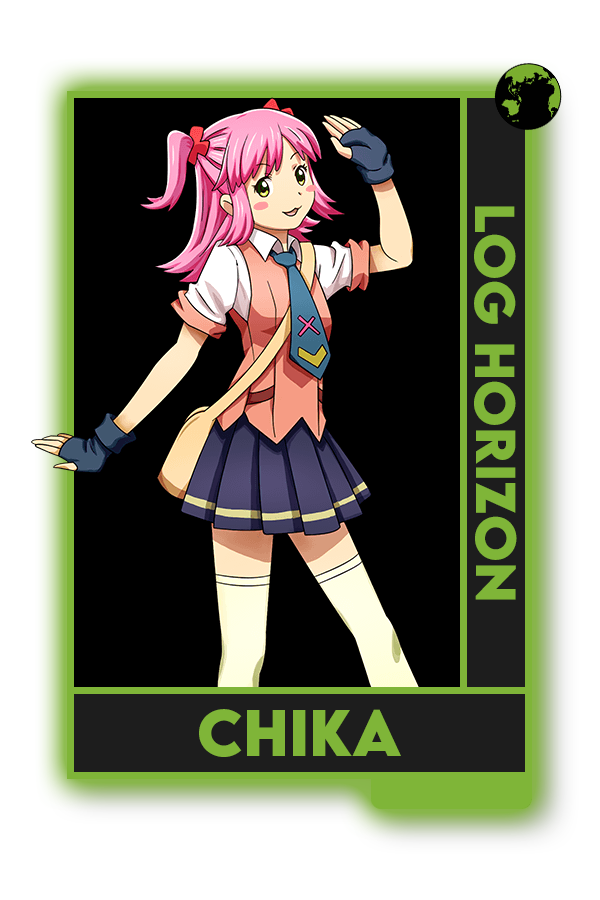
<style>
.page{position:relative;width:600px;height:900px;background:#000000}
.page>*{position:absolute;margin:0}
.t1{font:50px "LEMONMILK-Bold";color:#7fad41}
.t2{font:58.3px "LEMONMILK-Bold";color:#7fad41}
</style>
<div class="page">
<p class="t1" style="left:474px;top:206px;width:43px;height:394px;rotate:90deg">Log Horizon</p>
<p class="t2" style="left:199px;top:709px;width:202px;height:48px">Chika</p>
</div>
